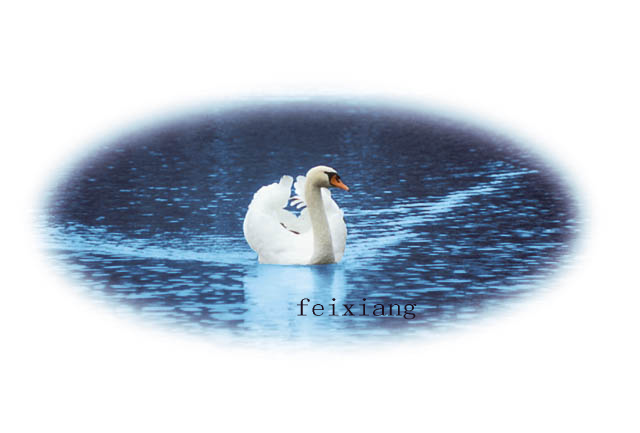
<style>
.page{position:relative;width:640px;height:433px;background:#ffffff}
.page>*{position:absolute;margin:0}
.t1{font:25.4px "Á¥Êé-Regular";color:#1b0d1b;scale:1.2 1}
</style>
<div class="page">
<p class="t1" style="left:297px;top:298px;width:120px;height:22px">feixiang</p>
</div>
